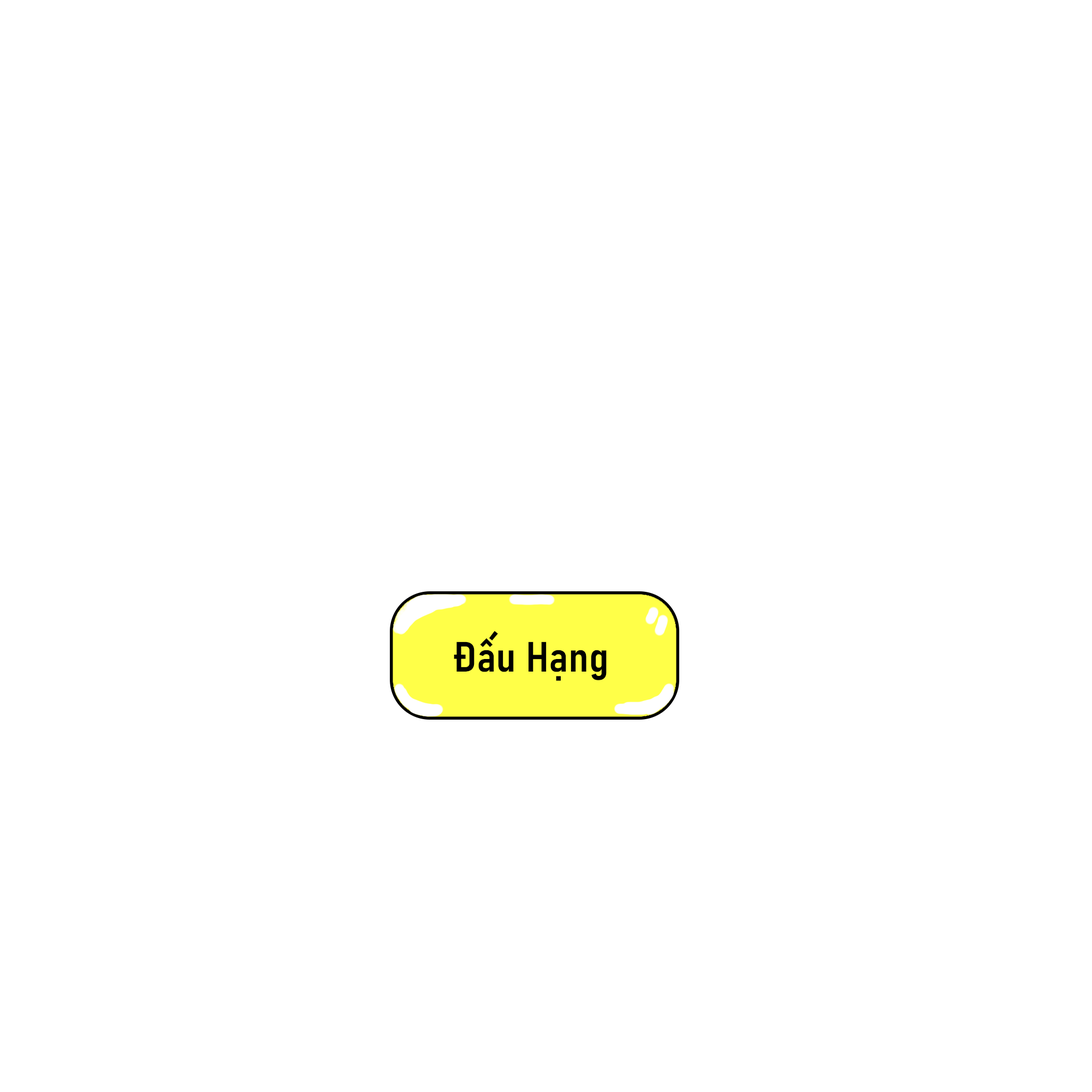
<style>
.page{position:relative;width:1092px;height:1092px;background:#ffffff}
.page>*{position:absolute;margin:0}
.t1{font:41.7px "Bahnschrift-SemiBoldSemiCondensed";color:#000000}
</style>
<div class="page">
<p class="t1" style="left:454px;top:631px;width:153px;height:50px">Đấu Hạng</p>
</div>
